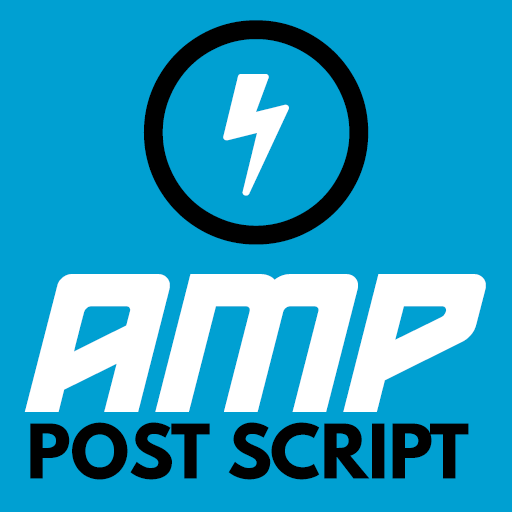
<style>
.page{position:relative;width:512px;height:512px;background:#00a0d2}
.page>*{position:absolute;margin:0}
.t1{font:66.7px/66.7px "LeagueSpartan-Bold";color:#000000;text-transform:uppercase}
.t2{font:186.7px/66.7px "HOUSE3009-Spaceport";color:#ffffff;text-transform:uppercase}
</style>
<div class="page">
<p class="t1" style="left:24px;top:274px;width:462px;height:206px;text-align:center"><span class="t2">AMP<br></span>POST SCRIPT</p>
</div>
